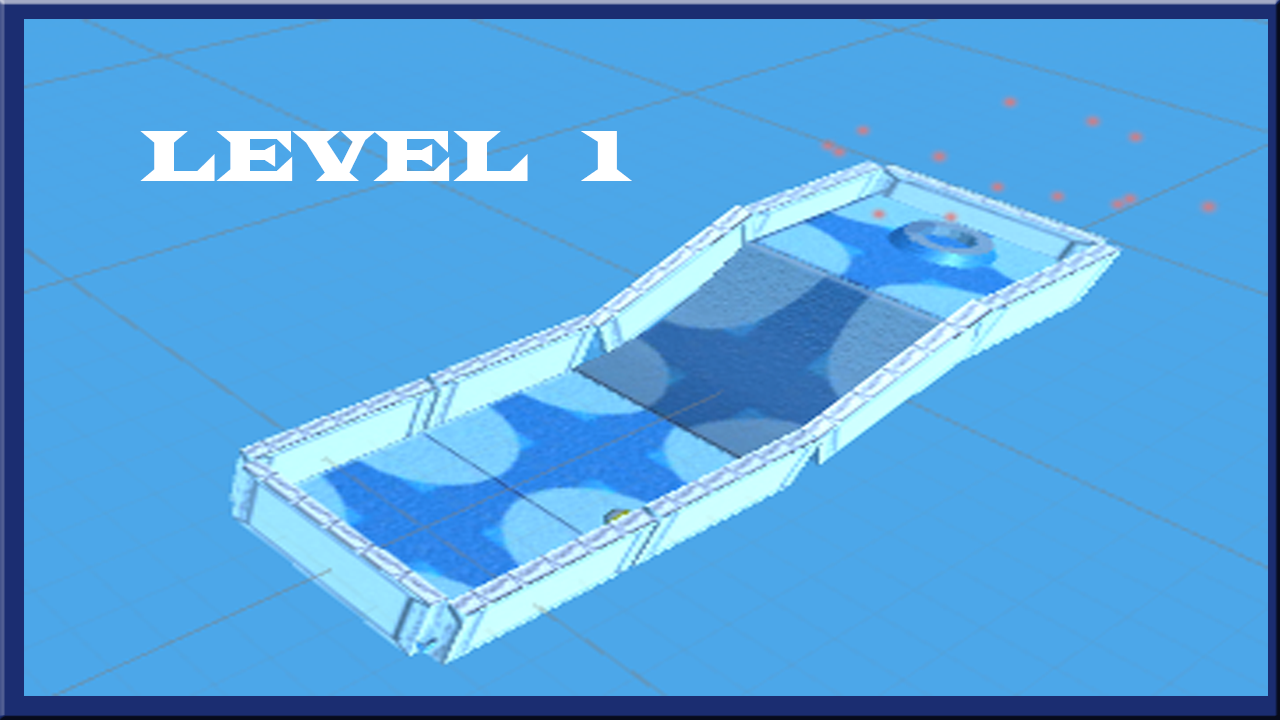
<style>
.page{position:relative;width:1280px;height:720px;background:#4ca7e9}
.page>*{position:absolute;margin:0}
.t1{font:75.4px "LatinWide";color:#ffffff;scale:0.76 1}
</style>
<div class="page">
<p class="t1" style="left:140px;top:131px;width:492px;height:50px">LEVEL   1</p>
</div>
